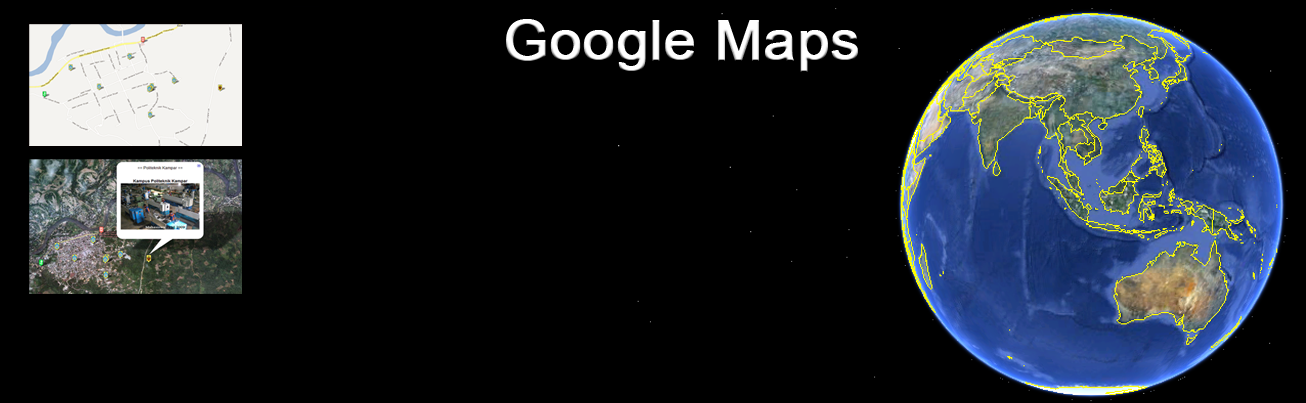
<style>
.page{position:relative;width:1306px;height:403px;background:#000000}
.page>*{position:absolute;margin:0}
.t1{font:55px "ArialMT";color:#ffffff;font-weight:bold;scale:1.04 1}
</style>
<div class="page">
<p class="t1" style="left:506px;top:19px;width:352px;height:53px">Google Maps</p>
</div>
